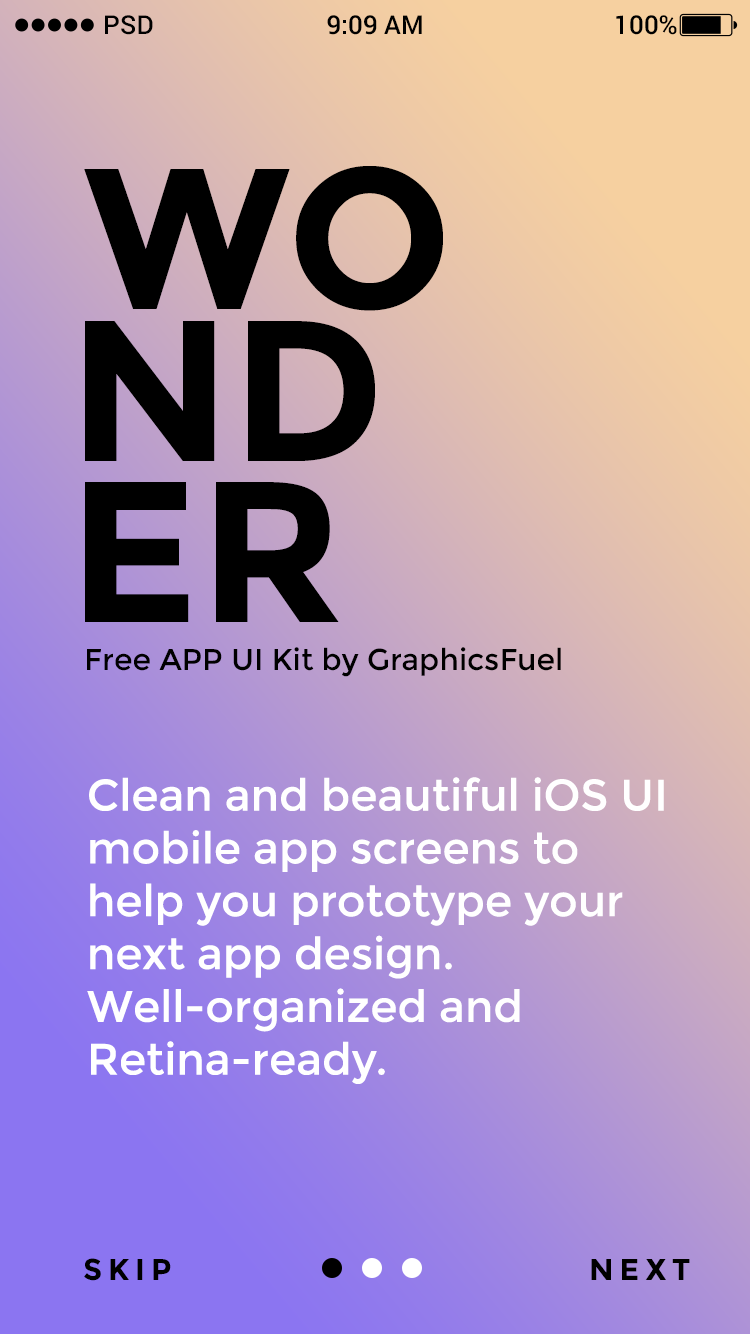
<style>
.page{position:relative;width:750px;height:1334px}
.page>*{position:absolute;margin:0}
.t1{font:26px "Roboto-Medium";color:#000000}
.t2{font:200px "Montserrat-Bold";color:#000000}
.t3{font:30px "Montserrat-Regular";color:#000000}
.t4{font:44px "Montserrat-Regular";color:#ffffff}
.t5{font:30px "Montserrat-Bold";letter-spacing:0.2em;color:#000000;text-transform:uppercase}
</style>
<div class="page">
<p class="t1" style="left:105px;top:15px;width:48px;height:20px">PSD</p>
<p class="t1" style="left:327px;top:15px;width:95px;height:20px">9:09 AM</p>
<p class="t1" style="left:616px;top:15px;width:61px;height:20px">100%</p>
<p class="t2" style="left:84px;top:166px;width:359px;height:145px">WO</p>
<p class="t2" style="left:85px;top:321px;width:290px;height:140px">ND</p>
<p class="t2" style="left:85px;top:482px;width:254px;height:140px">ER</p>
<p class="t3" style="left:87px;top:647px;width:474px;height:30px">Free APP UI Kit by GraphicsFuel</p>
<p class="t4" style="left:87px;top:777px;width:577px;height:307px">Clean and beautiful iOS UI mobile app screens to help you prototype your next app design. Well-organized and Retina-ready.</p>
<p class="t5" style="left:84px;top:1258px;width:87px;height:23px">skip</p>
<p class="t5" style="left:591px;top:1259px;width:99px;height:21px">Next</p>
</div>
